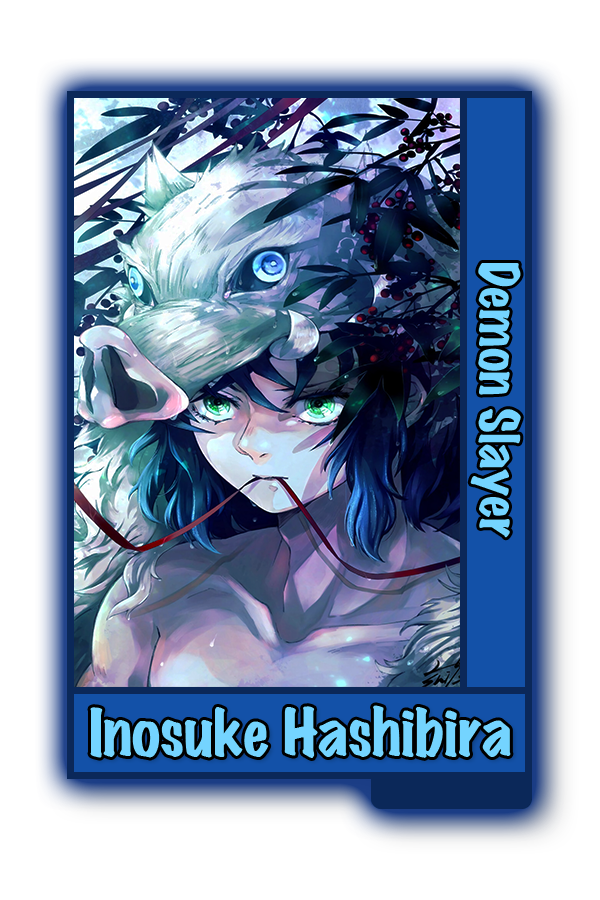
<style>
.page{position:relative;width:600px;height:900px;background:#ffffff}
.page>*{position:absolute;margin:0}
.t1{font:48.8px "MarkerFelt-Wide";color:#74d4ff}
.t2{font:58.3px "MarkerFelt-Wide";color:#74d4ff}
</style>
<div class="page">
<p class="t1" style="left:470px;top:263px;width:51px;height:275px;rotate:90deg">Demon Slayer</p>
<p class="t2" style="left:90px;top:705px;width:421px;height:53px">Inosuke Hashibira</p>
</div>
